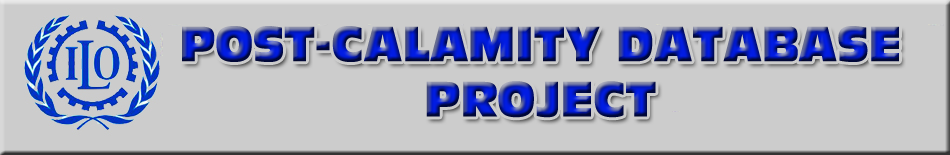
<style>
.page{position:relative;width:950px;height:155px;background:#cccccc}
.page>*{position:absolute;margin:0}
.t1{font:46px "AntiqueOliveCompact-Regular";scale:0.95 1}
</style>
<div class="page">
<p class="t1" style="left:182px;top:26px;width:717px;height:92px;text-align:center">POST-CALAMITY DATABASE<br>PROJECT</p>
</div>
